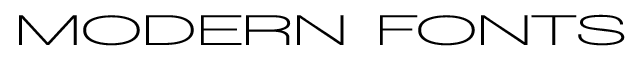
<style>
.page{position:relative;width:640px;height:58px;background:#ffffff}
.page>*{position:absolute;margin:0}
.t1{font:44px "WalkwayUltraExpandBold";color:#000000}
</style>
<div class="page">
<p class="t1" style="left:19px;top:14px;width:606px;height:32px">MODERN FONTS</p>
</div>
